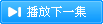
<style>
.page{position:relative;width:103px;height:24px}
.page>*{position:absolute;margin:0}
.t1{font:12px "SimSun";color:#ffffff}
</style>
<div class="page">
<p class="t1" style="left:27px;top:6px;width:59px;height:11px">播放下一集</p>
</div>
